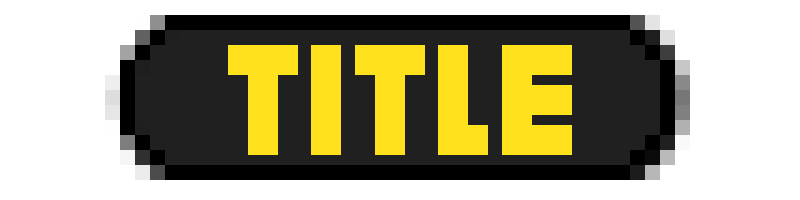
<style>
.page{position:relative;width:800px;height:200px;background:#ffffff}
.page>*{position:absolute;margin:0}
.t1{font:140px "04b19";letter-spacing:0.025em;color:#ffe21d}
</style>
<div class="page">
<p class="t1" style="left:228px;top:45px;width:344px;height:110px">TITLE</p>
</div>
